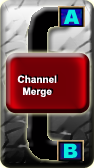
<style>
.page{position:relative;width:94px;height:168px}
.page>*{position:absolute;margin:0}
.t1{font:10px "Arial-BoldMT";color:#fcf9fd}
</style>
<div class="page">
<p class="t1" style="left:17px;top:75px;width:40px;height:22px;text-align:center">Channel<br>Merge</p>
</div>
